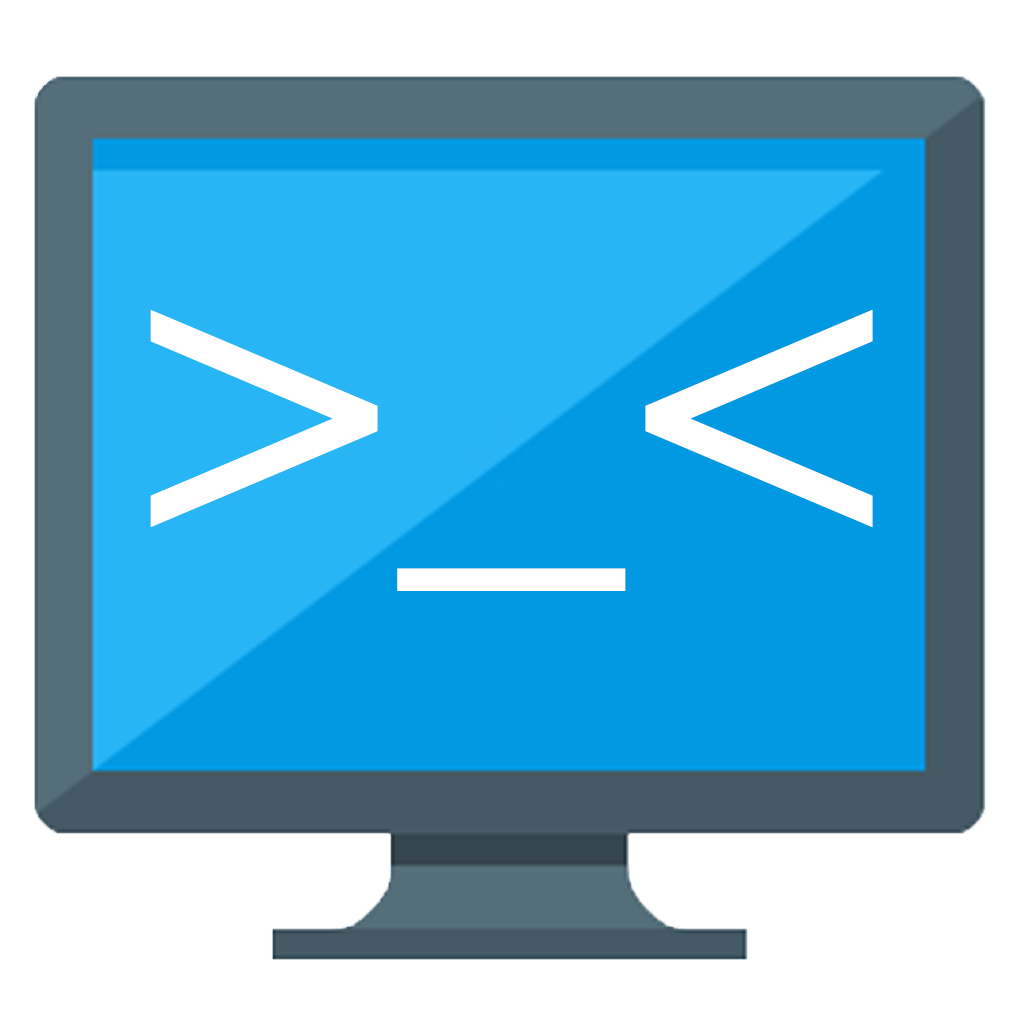
<style>
.page{position:relative;width:1024px;height:1024px;background:#ffffff}
.page>*{position:absolute;margin:0}
.t1{font:446.7px "Portugal-Roman";color:#ffffff}
</style>
<div class="page">
<p class="t1" style="left:150px;top:309px;width:723px;height:282px">&gt;_&lt;</p>
</div>
